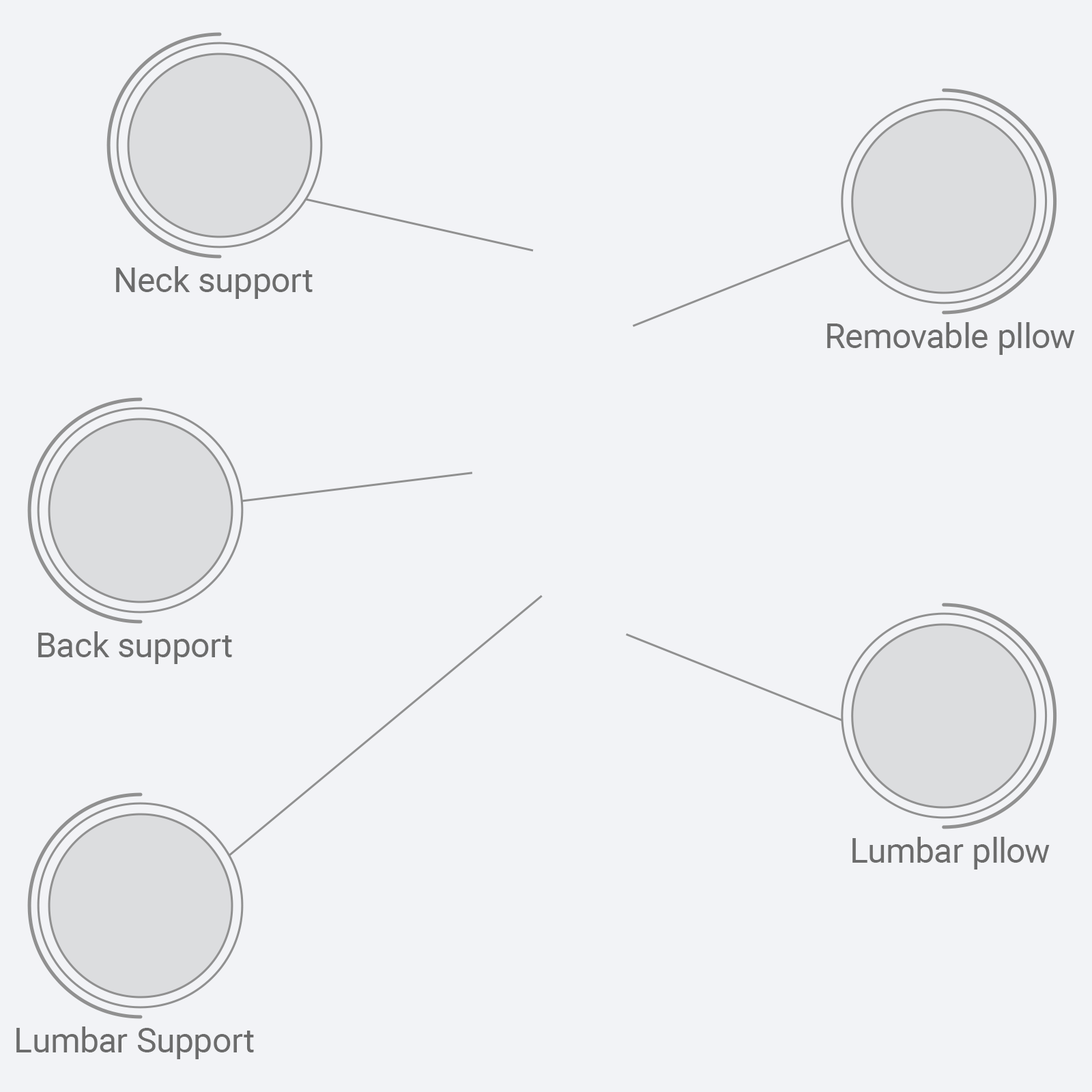
<style>
.page{position:relative;width:1092px;height:1092px;background:#f2f3f6}
.page>*{position:absolute;margin:0}
.t1{font:34.1px "Roboto-Regular";color:#6c6c6c}
</style>
<div class="page">
<p class="t1" style="left:116px;top:266px;width:197px;height:33px">Neck support</p>
<p class="t1" style="left:827px;top:322px;width:248px;height:33px">Removable pllow</p>
<p class="t1" style="left:38px;top:631px;width:194px;height:33px">Back support</p>
<p class="t1" style="left:852px;top:837px;width:198px;height:32px">Lumbar pllow</p>
<p class="t1" style="left:16px;top:1026px;width:238px;height:33px">Lumbar Support</p>
</div>
